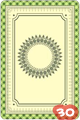
<style>
.page{position:relative;width:80px;height:120px}
.page>*{position:absolute;margin:0}
.t1{font:12.2px "DFPHaiBaoW12";color:#fffefe}
</style>
<div class="page">
<p class="t1" style="left:56px;top:108px;width:19px;height:9px">30</p>
</div>
